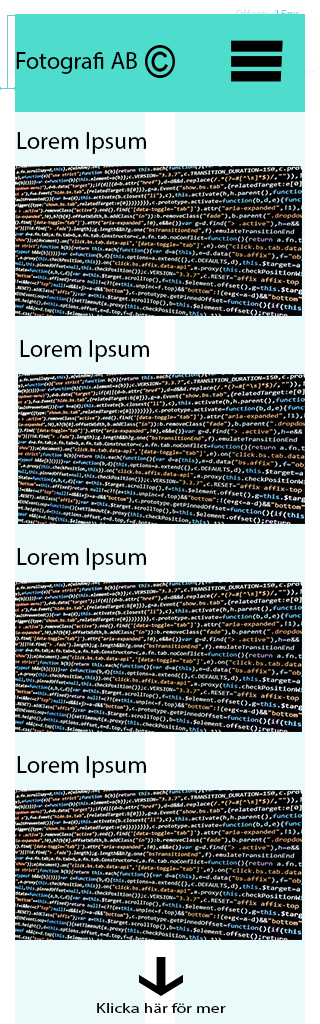
<style>
.page{position:relative;width:320px;height:1024px;background:#eafafa}
.page>*{position:absolute;margin:0}
.t1{font:24px "MyriadPro-Regular";color:#000000}
.t2{font:13.8px "MyriadPro-Regular";color:#000000;scale:1.29 1}
</style>
<div class="page">
<p class="t1" style="left:16px;top:52px;width:121px;height:22px">Fotografi AB</p>
<p class="t1" style="left:17px;top:132px;width:129px;height:22px">Lorem Ipsum</p>
<p class="t1" style="left:20px;top:340px;width:129px;height:22px">Lorem Ipsum</p>
<p class="t1" style="left:17px;top:548px;width:129px;height:22px">Lorem Ipsum</p>
<p class="t1" style="left:17px;top:756px;width:129px;height:22px">Lorem Ipsum</p>
<p class="t2" style="left:97px;top:1003px;width:129px;height:10px">Klicka här för mer</p>
</div>
